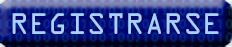
<style>
.page{position:relative;width:232px;height:47px}
.page>*{position:absolute;margin:0}
.t1{font:31.9px "OCRAExtended";color:#a8d1ff}
</style>
<div class="page">
<p class="t1" style="left:12px;top:13px;width:207px;height:21px">REGISTRARSE</p>
</div>
